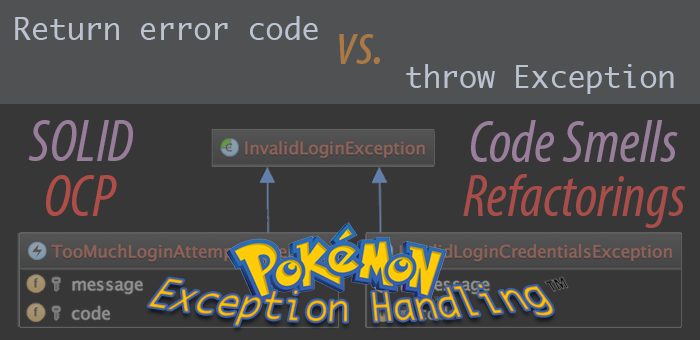
<style>
.page{position:relative;width:700px;height:340px;background:#373737}
.page>*{position:absolute;margin:0}
.t1{font:30px "Monaco";color:#bac3cf}
.t2{font:60px "MyriadPro-CondIt";color:#ac7a44}
.t3{font:60px "MyriadPro-CondIt";color:#977d9a}
.t4{font:60px "MyriadPro-CondIt";color:#9a7f9d}
.t5{font:60px "MyriadPro-CondIt";color:#a84e4a}
.t6{font:60px "MyriadPro-CondIt";color:#af4e49}
.t7{font:36px "Monaco";color:#f1b706}
</style>
<div class="page">
<p class="t1" style="left:15px;top:16px;width:303px;height:24px">Return error code</p>
<p class="t2" style="left:339px;top:34px;width:41px;height:30px">vs.</p>
<p class="t1" style="left:406px;top:64px;width:268px;height:30px">throw Exception</p>
<p class="t3" style="left:28px;top:120px;width:105px;height:41px">SOLID</p>
<p class="t4" style="left:471px;top:120px;width:207px;height:42px">Code Smells</p>
<p class="t5" style="left:463px;top:174px;width:223px;height:54px">Refactorings</p>
<p class="t6" style="left:46px;top:175px;width:71px;height:41px">OCP</p>
<p class="t7" style="left:148px;top:278px;width:405px;height:48px">Exception Handling</p>
</div>
